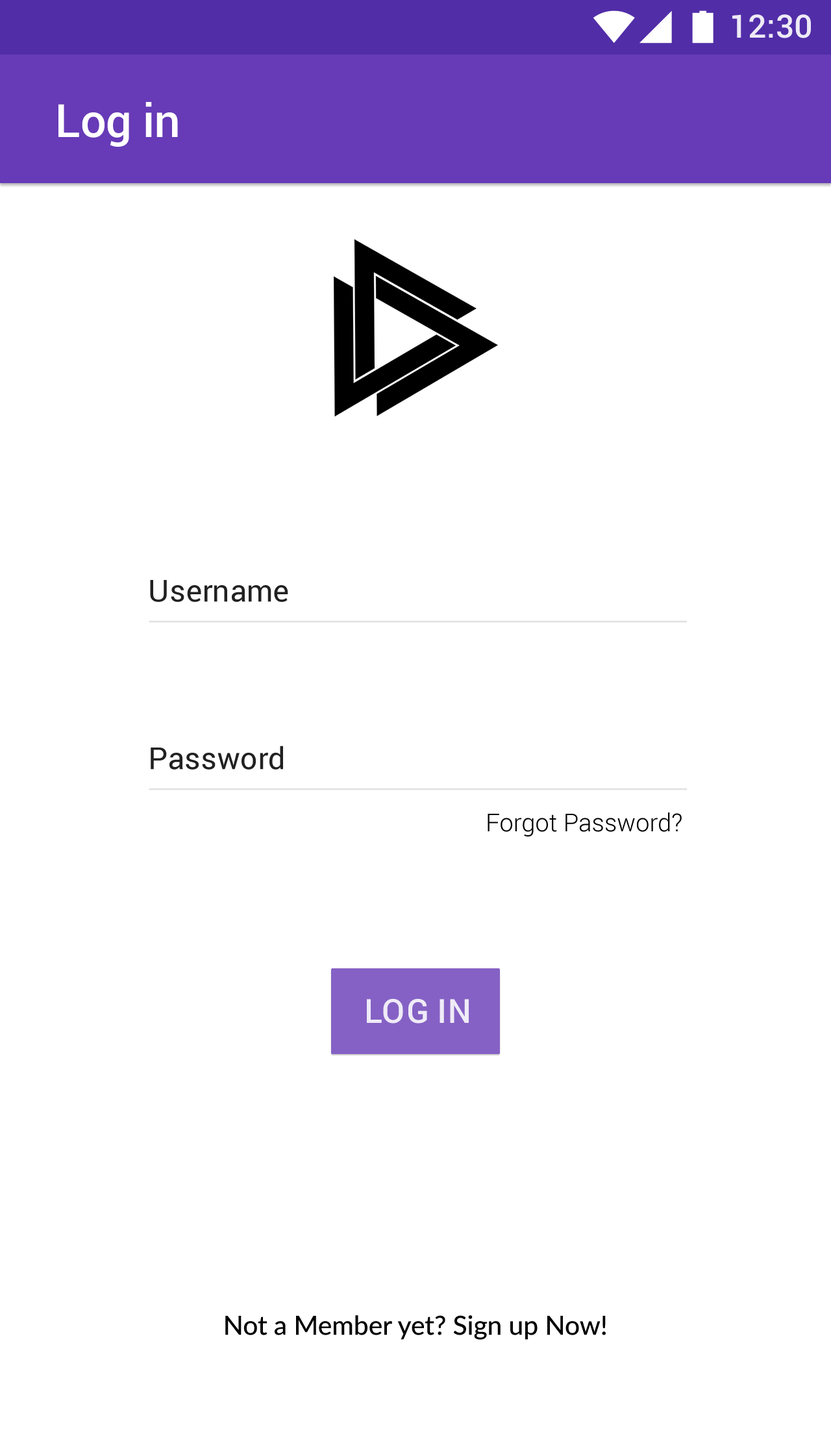
<style>
.page{position:relative;width:831px;height:1434px;background:#ffffff}
.page>*{position:absolute;margin:0}
.t1{font:32.2px "Roboto-Medium";color:#eeeaf6}
.t2{font:46px "Roboto-Medium";color:#ffffff}
.t3{font:30.4px "Roboto-Regular";color:#212121}
.t4{font:24.7px "Roboto-Light";color:#000000}
.t5{font:33.3px "Roboto-Medium";letter-spacing:0.03em;color:#ffffff}
.t6{font:26.4px "Lato-Medium";color:#000000}
</style>
<div class="page">
<p class="t1" style="left:733px;top:14px;width:78px;height:24px">12:30</p>
<p class="t2" style="left:58px;top:102px;width:120px;height:45px">Log in</p>
<p class="t3" style="left:150px;top:580px;width:138px;height:22px">Username</p>
<p class="t3" style="left:151px;top:746px;width:132px;height:24px">Password</p>
<p class="t4" style="left:488px;top:813px;width:194px;height:24px">Forgot Password?</p>
<p class="t5" style="left:367px;top:999px;width:102px;height:25px;opacity:0.87">LOG IN</p>
<p class="t6" style="left:225px;top:1315px;width:381px;height:25px">Not a Member yet? Sign up Now!</p>
</div>
